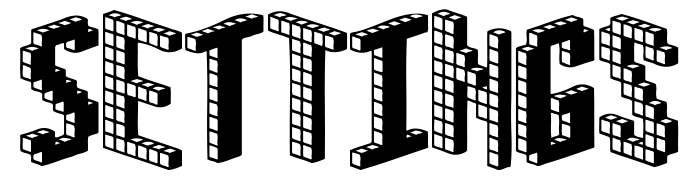
<style>
.page{position:relative;width:700px;height:180px;background:#ffffff}
.page>*{position:absolute;margin:0}
.t1{font:166.7px "Blox-(BRK";color:#000000}
</style>
<div class="page">
<p class="t1" style="left:20px;top:9px;width:659px;height:161px">sEtTiNgS</p>
</div>
